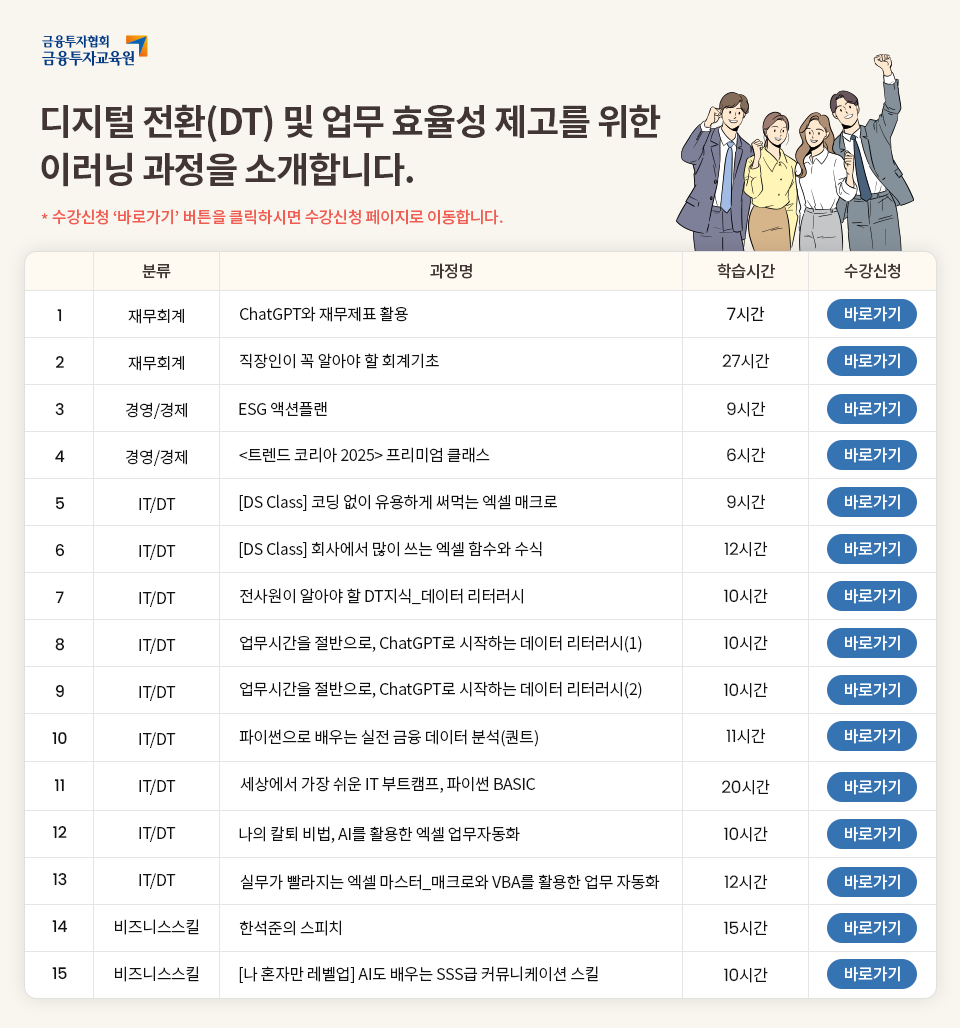
<style>
.page{position:relative;width:960px;height:1028px;background:#ffffff}
.page>*{position:absolute;margin:0}
.t1{font:36px/48px "NotoSansCJKkr-Bold";letter-spacing:-0.034em;color:#423635}
.t2{font:16px "NotoSansCJKkr-Medium";letter-spacing:-0.02em;color:#f05d53}
.t3{font:16px "NotoSansCJKkr-Medium";letter-spacing:-0.02em;color:#423635}
.t4{font:16px/47px "Poppins-Medium";letter-spacing:-0.02em;color:#111111}
.t5{font:16px/47px "NotoSansCJKkr-DemiLight";letter-spacing:-0.02em;color:#111111}
.t6{font:16px "NotoSansCJKkr-DemiLight";letter-spacing:-0.02em;color:#111111}
.t7{font:17px "Poppins-Regular";letter-spacing:-0.02em;color:#111111}
.t8{font:16px "NotoSansCJKkr-Medium";letter-spacing:-0.02em;color:#ffffff}
</style>
<div class="page">
<p class="t1" style="left:41px;top:104px;width:620px;height:83px">디지털 전환(DT) 및 업무 효율성 제고를 위한<br>이러닝 과정을 소개합니다.</p>
<p class="t2" style="left:41px;top:209px;width:462px;height:16px">* 수강신청 ‘바로가기’ 버튼을 클릭하시면 수강신청 페이지로 이동합니다.</p>
<p class="t3" style="left:142px;top:264px;width:29px;height:15px">분류</p>
<p class="t3" style="left:430px;top:263px;width:42px;height:16px">과정명</p>
<p class="t3" style="left:717px;top:263px;width:58px;height:16px">학습시간</p>
<p class="t3" style="left:844px;top:263px;width:56px;height:16px">수강신청</p>
<p class="t4" style="left:52px;top:309px;width:16px;height:671px;text-align:center">1<br>2<br>3<br>4<br>5<br>6<br>7<br>8<br>9<br>10<br>11<br>12<br>13<br>14<br>15</p>
<p class="t5" style="left:115px;top:308px;width:84px;height:674px;text-align:center">재무회계<br>재무회계<br>경영/경제<br>경영/경제<br>IT/DT<br>IT/DT<br>IT/DT<br>IT/DT<br>IT/DT<br>IT/DT<br>IT/DT<br>IT/DT<br>IT/DT<br>비즈니스스킬<br>비즈니스스킬</p>
<p class="t6" style="left:240px;top:306px;width:168px;height:16px">ChatGPT와 재무제표 활용</p>
<p class="t6" style="left:727px;top:306px;width:38px;height:16px"><span class="t7">7</span>시간</p>
<p class="t8" style="left:845px;top:306px;width:55px;height:16px">바로가기</p>
<p class="t6" style="left:240px;top:353px;width:199px;height:16px">직장인이 꼭 알아야 할 회계기초</p>
<p class="t7" style="left:722px;top:353px;width:48px;height:16px">27<span class="t6">시간</span></p>
<p class="t8" style="left:845px;top:353px;width:55px;height:16px">바로가기</p>
<p class="t6" style="left:239px;top:401px;width:88px;height:16px">ESG 액션플랜</p>
<p class="t6" style="left:727px;top:401px;width:39px;height:16px"><span class="t7">9</span>시간</p>
<p class="t8" style="left:845px;top:401px;width:55px;height:16px">바로가기</p>
<p class="t6" style="left:239px;top:447px;width:251px;height:16px">&lt;트렌드 코리아 2025&gt; 프리미엄 클래스</p>
<p class="t6" style="left:727px;top:447px;width:39px;height:16px"><span class="t7">6</span>시간</p>
<p class="t8" style="left:845px;top:447px;width:55px;height:16px">바로가기</p>
<p class="t6" style="left:239px;top:494px;width:318px;height:17px">[DS Class] 코딩 없이 유용하게 써먹는 엑셀 매크로</p>
<p class="t6" style="left:727px;top:494px;width:39px;height:16px"><span class="t7">9</span>시간</p>
<p class="t8" style="left:845px;top:494px;width:55px;height:16px">바로가기</p>
<p class="t6" style="left:239px;top:541px;width:303px;height:17px">[DS Class] 회사에서 많이 쓰는 엑셀 함수와 수식</p>
<p class="t7" style="left:724px;top:541px;width:44px;height:16px">12<span class="t6">시간</span></p>
<p class="t8" style="left:845px;top:541px;width:55px;height:16px">바로가기</p>
<p class="t6" style="left:240px;top:588px;width:283px;height:17px">전사원이 알아야 할 DT지식_데이터 리터러시</p>
<p class="t7" style="left:724px;top:588px;width:44px;height:16px">10<span class="t6">시간</span></p>
<p class="t8" style="left:845px;top:588px;width:55px;height:16px">바로가기</p>
<p class="t6" style="left:240px;top:635px;width:402px;height:18px">업무시간을 절반으로, ChatGPT로 시작하는 데이터 리터러시(1)</p>
<p class="t7" style="left:724px;top:635px;width:44px;height:16px">10<span class="t6">시간</span></p>
<p class="t8" style="left:845px;top:635px;width:55px;height:16px">바로가기</p>
<p class="t6" style="left:240px;top:681px;width:402px;height:18px">업무시간을 절반으로, ChatGPT로 시작하는 데이터 리터러시(2)</p>
<p class="t7" style="left:724px;top:682px;width:44px;height:16px">10<span class="t6">시간</span></p>
<p class="t8" style="left:845px;top:682px;width:55px;height:16px">바로가기</p>
<p class="t6" style="left:239px;top:729px;width:299px;height:18px">파이썬으로 배우는 실전 금융 데이터 분석(퀀트)</p>
<p class="t7" style="left:726px;top:728px;width:40px;height:16px">11<span class="t6">시간</span></p>
<p class="t8" style="left:845px;top:728px;width:55px;height:16px">바로가기</p>
<p class="t6" style="left:240px;top:776px;width:296px;height:17px">세상에서 가장 쉬운 IT 부트캠프, 파이썬 BASIC</p>
<p class="t7" style="left:722px;top:779px;width:48px;height:16px">20<span class="t6">시간</span></p>
<p class="t8" style="left:845px;top:779px;width:55px;height:16px">바로가기</p>
<p class="t6" style="left:239px;top:826px;width:281px;height:17px">나의 칼퇴 비법, AI를 활용한 엑셀 업무자동화</p>
<p class="t7" style="left:724px;top:826px;width:44px;height:16px">10<span class="t6">시간</span></p>
<p class="t8" style="left:845px;top:826px;width:55px;height:16px">바로가기</p>
<p class="t6" style="left:240px;top:874px;width:420px;height:17px">실무가 빨라지는 엑셀 마스터_매크로와 VBA를 활용한 업무 자동화</p>
<p class="t7" style="left:724px;top:874px;width:44px;height:16px">12<span class="t6">시간</span></p>
<p class="t8" style="left:845px;top:874px;width:55px;height:16px">바로가기</p>
<p class="t6" style="left:239px;top:920px;width:102px;height:16px">한석준의 스피치</p>
<p class="t7" style="left:724px;top:920px;width:44px;height:16px">15<span class="t6">시간</span></p>
<p class="t8" style="left:845px;top:920px;width:55px;height:16px">바로가기</p>
<p class="t6" style="left:239px;top:966px;width:359px;height:17px">[나 혼자만 레벨업] AI도 배우는 SSS급 커뮤니케이션 스킬</p>
<p class="t8" style="left:845px;top:966px;width:55px;height:16px">바로가기</p>
<p class="t7" style="left:724px;top:967px;width:44px;height:16px">10<span class="t6">시간</span></p>
</div>
